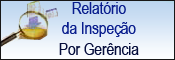
<style>
.page{position:relative;width:175px;height:60px}
.page>*{position:absolute;margin:0}
.t1{font:17.2px "ArialNarrow";color:#091d8d;scale:0.96 1}
.t2{font:17.2px "ArialNarrow";color:#060e3c;scale:0.96 1}
</style>
<div class="page">
<p class="t1" style="left:59px;top:2px;width:80px;height:53px;text-align:center">Relatório<br>da Inspeção<br><span class="t2">Por Gerência</span></p>
</div>
